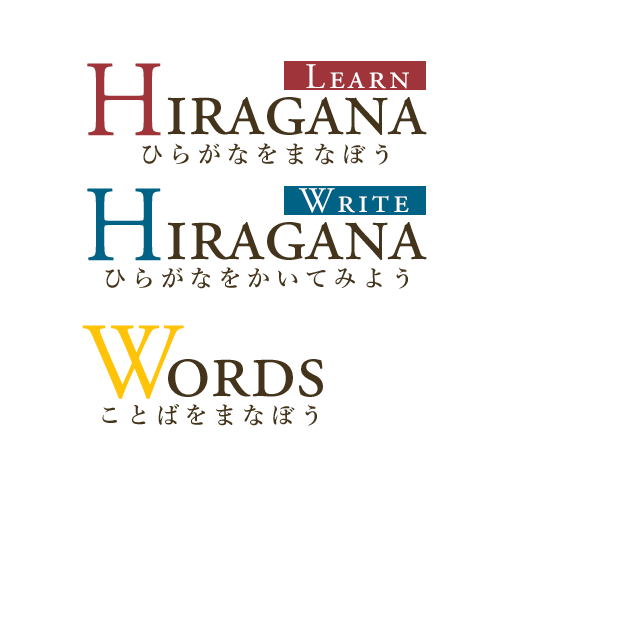
<style>
.page{position:relative;width:640px;height:640px;background:#ffffff}
.page>*{position:absolute;margin:0}
.t1{font:108.1px "AGaramondPro-Regular";color:#9f353a;scale:0.94 1}
.t2{font:36px "AGaramondPro-Regular";letter-spacing:0.1em;color:#ffffff;font-variant:small-caps}
.t3{font:82.8px "AGaramondPro-Regular";color:#43341b;font-variant:small-caps}
.t4{font:24px "YuMincho-Demibold";letter-spacing:0.2em;color:#43341b;font-variant:small-caps}
.t5{font:108.1px "AGaramondPro-Regular";color:#006284;scale:0.94 1}
.t6{font:108.1px "AGaramondPro-Regular";color:#ffc408;scale:0.94 1}
</style>
<div class="page">
<p class="t1" style="left:87px;top:63px;width:74px;height:73px">H</p>
<p class="t2" style="left:306px;top:64px;width:103px;height:25px">Learn</p>
<p class="t3" style="left:167px;top:97px;width:260px;height:38px">iragana</p>
<p class="t4" style="left:142px;top:143px;width:246px;height:22px">ひらがなをまなぼう</p>
<p class="t5" style="left:87px;top:188px;width:74px;height:73px">H</p>
<p class="t2" style="left:298px;top:188px;width:111px;height:25px">Write</p>
<p class="t3" style="left:167px;top:222px;width:260px;height:38px">iragana</p>
<p class="t4" style="left:105px;top:267px;width:303px;height:22px">ひらがなをかいてみよう</p>
<p class="t6" style="left:82px;top:325px;width:102px;height:74px">W</p>
<p class="t3" style="left:168px;top:359px;width:155px;height:38px">ords</p>
<p class="t4" style="left:102px;top:404px;width:215px;height:22px">ことばをまなぼう</p>
</div>
